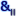
<style>
.page{position:relative;width:16px;height:16px;background:#ffffff}
.page>*{position:absolute;margin:0}
.t1{font:14px "Verdana";color:#130661}
.t2{font:6px "Verdana";color:#2c2362}
</style>
<div class="page">
<p class="t1" style="left:0px;top:1px;width:11px;height:10px">&amp;</p>
<p class="t2" style="left:11px;top:9px;width:4px;height:7px">||</p>
</div>
